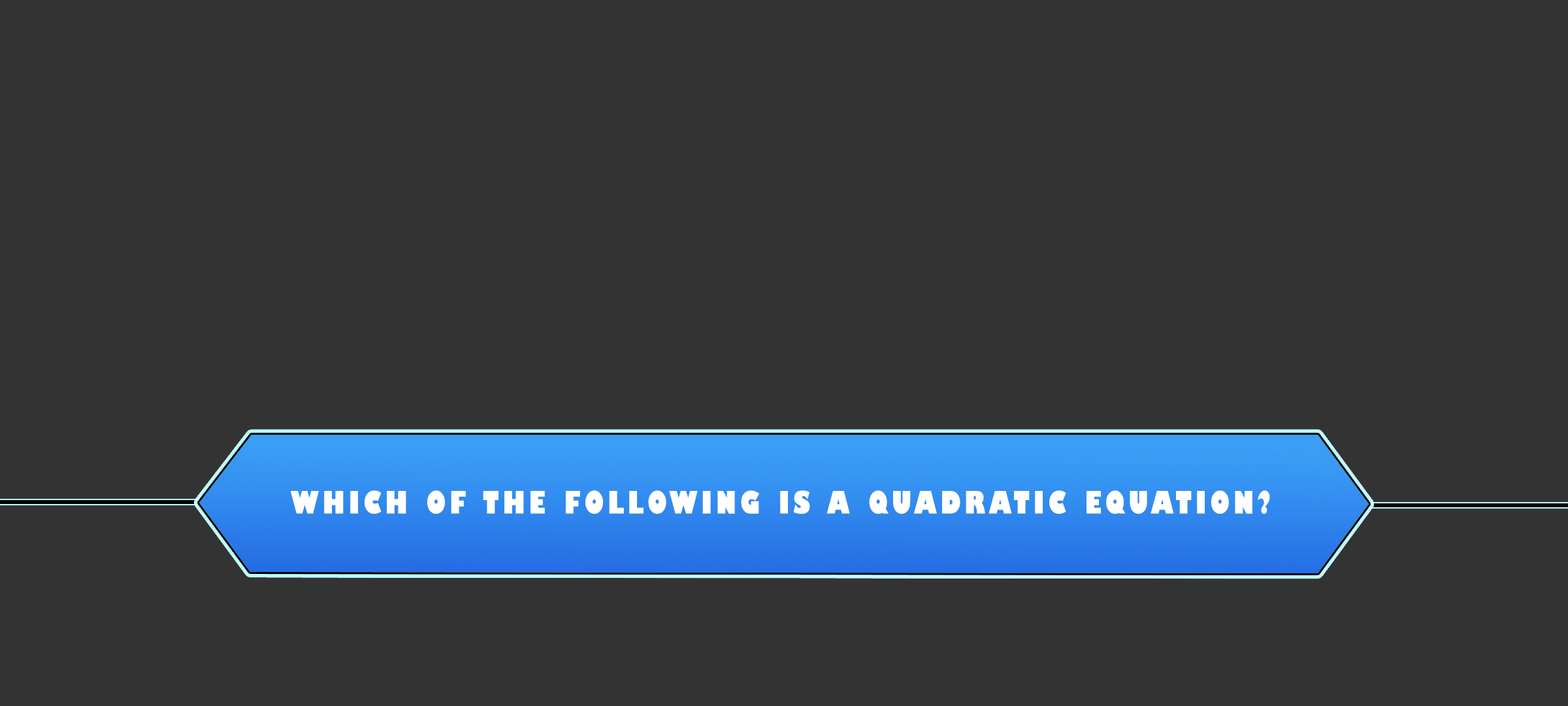
<style>
.page{position:relative;width:1568px;height:706px;background:#333333}
.page>*{position:absolute;margin:0}
.t1{font:30px "GillSans-UltraBoldCondensed";letter-spacing:0.115em;color:#ffffff;text-transform:uppercase;scale:1.12 1}
</style>
<div class="page">
<p class="t1" style="left:290px;top:490px;width:980px;height:24px">Which of the following is a quadratic equation?</p>
</div>
